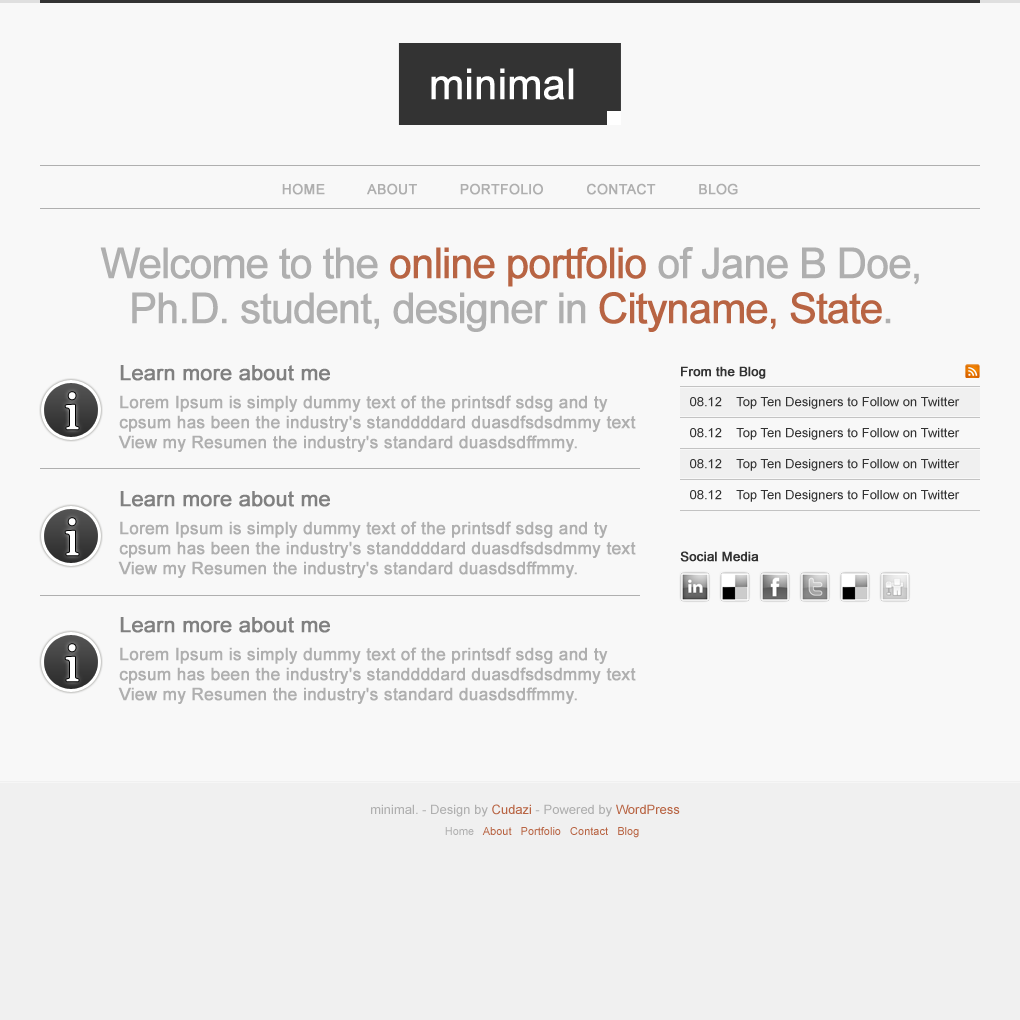
<style>
.page{position:relative;width:1020px;height:1020px;background:#f8f8f8}
.page>*{position:absolute;margin:0}
.t1{font:42px "ArialMT";letter-spacing:-0.02em;color:#ffffff;font-weight:bold}
.t2{font:14px "ArialMT";color:#afafaf;font-weight:bold}
.t3{font:42px/45px "ArialMT";letter-spacing:-0.05em;color:#afafaf;font-weight:bold}
.t4{font:42px/45px "ArialMT";letter-spacing:-0.05em;color:#b86443;font-weight:bold}
.t5{font:21px "ArialMT";color:#808080;font-weight:bold}
.t6{font:13px "ArialMT";color:#333333;font-weight:bold}
.t7{font:49px "Georgia";color:#ffffff;font-weight:bold}
.t8{font:17px/20px "ArialMT";color:#afafaf;font-weight:bold}
.t9{font:13px "ArialMT";color:#333333}
.t10{font:13px "ArialMT";color:#afafaf}
.t11{font:13px "ArialMT";color:#b86443}
.t12{font:11px "ArialMT";color:#b86443}
.t13{font:11px "ArialMT";color:#afafaf}
</style>
<div class="page">
<p class="t1" style="left:431px;top:68px;width:143px;height:32px">minimal</p>
<p class="t2" style="left:282px;top:183px;width:456px;height:12px">HOME          ABOUT          PORTFOLIO          CONTACT          BLOG</p>
<p class="t3" style="left:100px;top:247px;width:819px;height:85px;text-align:center">Welcome to the <span class="t4">online portfolio</span> of Jane B Doe,<br>Ph.D. student, designer in <span class="t4">Cityname, State</span>.</p>
<p class="t5" style="left:120px;top:365px;width:210px;height:16px">Learn more about me</p>
<p class="t6" style="left:681px;top:366px;width:85px;height:13px">From the Blog</p>
<p class="t7" style="left:65px;top:392px;width:14px;height:38px">i</p>
<p class="t8" style="left:118px;top:395px;width:518px;height:57px">Lorem Ipsum is simply dummy text of the printsdf sdsg and ty<br>cpsum has been the industry's standdddard duasdfsdsdmmy text<br>View my Resumen the industry's standard duasdsdffmmy.</p>
<p class="t9" style="left:690px;top:397px;width:270px;height:12px">08.12    Top Ten Designers to Follow on Twitter</p>
<p class="t9" style="left:690px;top:428px;width:270px;height:12px">08.12    Top Ten Designers to Follow on Twitter</p>
<p class="t9" style="left:690px;top:459px;width:270px;height:12px">08.12    Top Ten Designers to Follow on Twitter</p>
<p class="t5" style="left:120px;top:491px;width:210px;height:16px">Learn more about me</p>
<p class="t9" style="left:690px;top:490px;width:270px;height:12px">08.12    Top Ten Designers to Follow on Twitter</p>
<p class="t7" style="left:65px;top:518px;width:14px;height:38px">i</p>
<p class="t8" style="left:118px;top:521px;width:518px;height:57px">Lorem Ipsum is simply dummy text of the printsdf sdsg and ty<br>cpsum has been the industry's standdddard duasdfsdsdmmy text<br>View my Resumen the industry's standard duasdsdffmmy.</p>
<p class="t6" style="left:680px;top:551px;width:79px;height:11px">Social Media</p>
<p class="t5" style="left:120px;top:617px;width:210px;height:16px">Learn more about me</p>
<p class="t7" style="left:65px;top:644px;width:14px;height:38px">i</p>
<p class="t8" style="left:118px;top:647px;width:518px;height:57px">Lorem Ipsum is simply dummy text of the printsdf sdsg and ty<br>cpsum has been the industry's standdddard duasdfsdsdmmy text<br>View my Resumen the industry's standard duasdsdffmmy.</p>
<p class="t10" style="left:371px;top:804px;width:309px;height:13px">minimal. - Design by <span class="t11">Cudazi </span>- Powered by <span class="t11">WordPress</span></p>
<p class="t12" style="left:445px;top:827px;width:194px;height:11px"><span class="t13">Home   </span>About   Portfolio   Contact   Blog</p>
</div>
